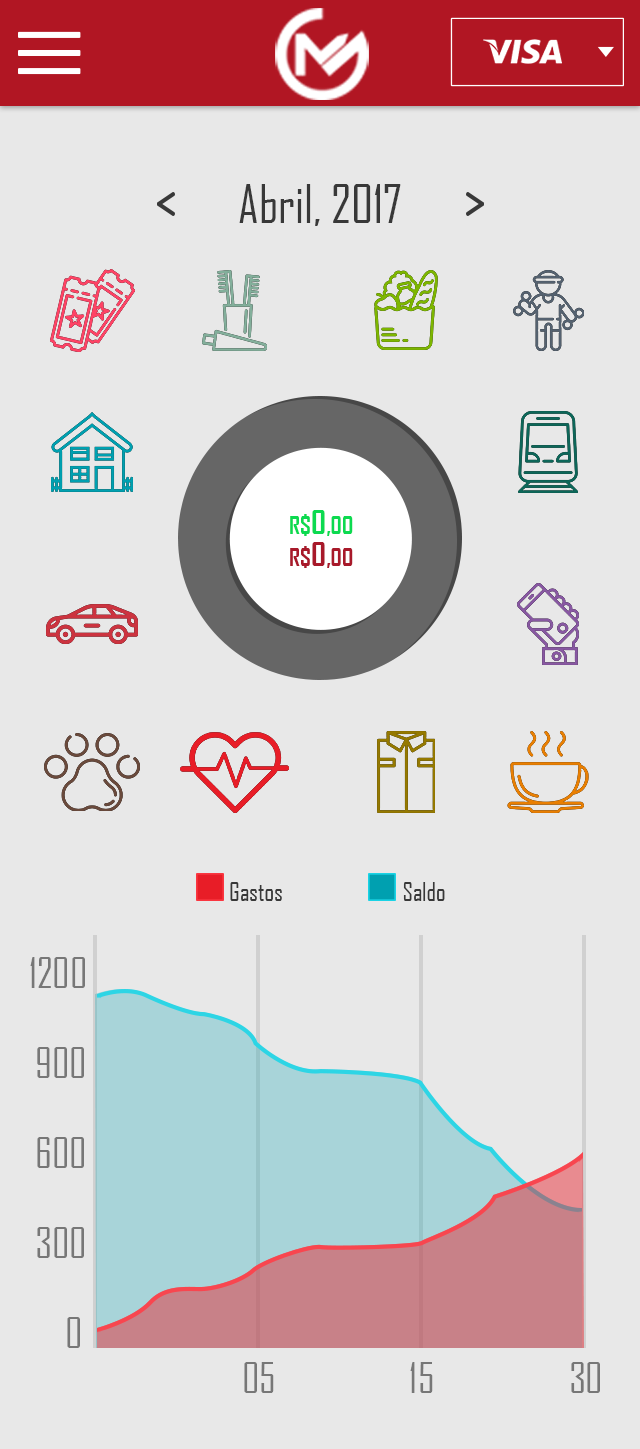
<style>
.page{position:relative;width:640px;height:1449px;background:#e8e8e8}
.page>*{position:absolute;margin:0}
.t1{font:50.7px "AgencyFB-Reg";color:#383838}
.t2{font:24.3px "AgencyFB-Bold";color:#0cda50}
.t3{font:32.4px "AgencyFB-Bold";color:#0cda50}
.t4{font:24.3px "AgencyFB-Bold";color:#a8192a}
.t5{font:32.4px "AgencyFB-Bold";color:#a8192a}
.t6{font:25px "AgencyFB-Reg";color:#383838}
.t7{font:39.9px "AgencyFB-Reg";color:#777777}
</style>
<div class="page">
<p class="t1" style="left:239px;top:184px;width:162px;height:42px">Abril, 2017</p>
<p class="t2" style="left:290px;top:510px;width:63px;height:26px">R$<span class="t3">0</span>,00</p>
<p class="t4" style="left:290px;top:542px;width:63px;height:26px">R$<span class="t5">0</span>,00</p>
<p class="t6" style="left:230px;top:882px;width:52px;height:19px">Gastos</p>
<p class="t6" style="left:403px;top:882px;width:42px;height:19px">Saldo</p>
<p class="t7" style="left:30px;top:957px;width:55px;height:31px">1200</p>
<p class="t7" style="left:37px;top:1047px;width:47px;height:31px">900</p>
<p class="t7" style="left:37px;top:1137px;width:47px;height:31px">600</p>
<p class="t7" style="left:37px;top:1227px;width:47px;height:31px">300</p>
<p class="t7" style="left:67px;top:1317px;width:13px;height:31px">0</p>
<p class="t7" style="left:244px;top:1362px;width:30px;height:31px">05</p>
<p class="t7" style="left:410px;top:1362px;width:23px;height:31px">15</p>
<p class="t7" style="left:571px;top:1362px;width:29px;height:31px">30</p>
</div>
